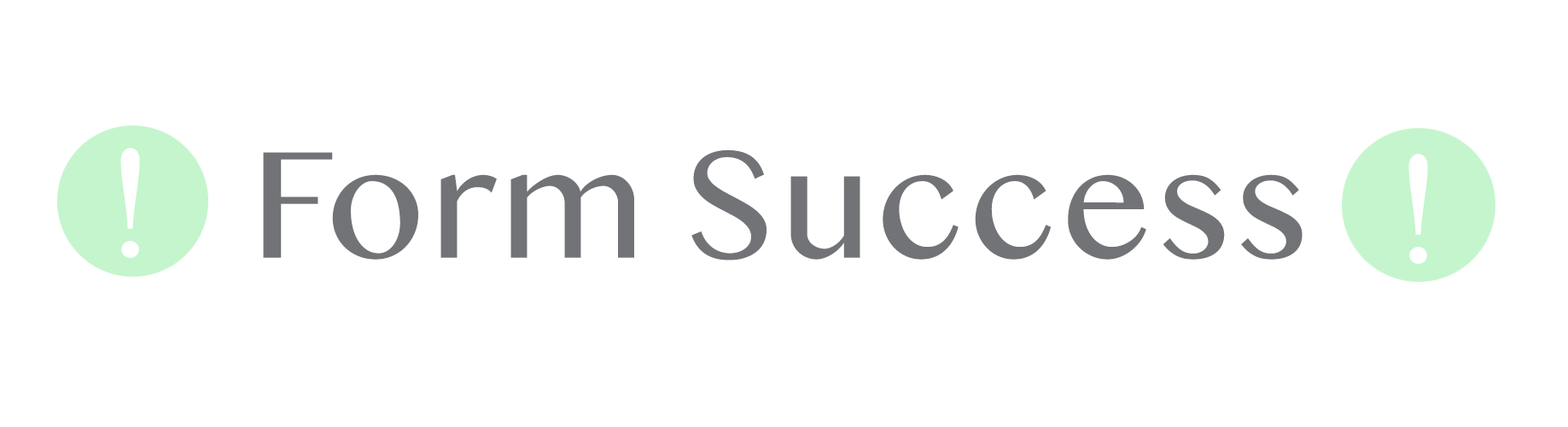
<style>
.page{position:relative;width:1568px;height:427px;background:#ffffff}
.page>*{position:absolute;margin:0}
.t1{font:142.3px "BanglaMN";color:#ffffff}
.t2{font:142.3px "BanglaMN";color:#717376}
</style>
<div class="page">
<p class="t1" style="left:120px;top:148px;width:20px;height:110px">!</p>
<p class="t2" style="left:263px;top:149px;width:1040px;height:111px">Form Success</p>
<p class="t1" style="left:1408px;top:154px;width:20px;height:110px">!</p>
</div>
